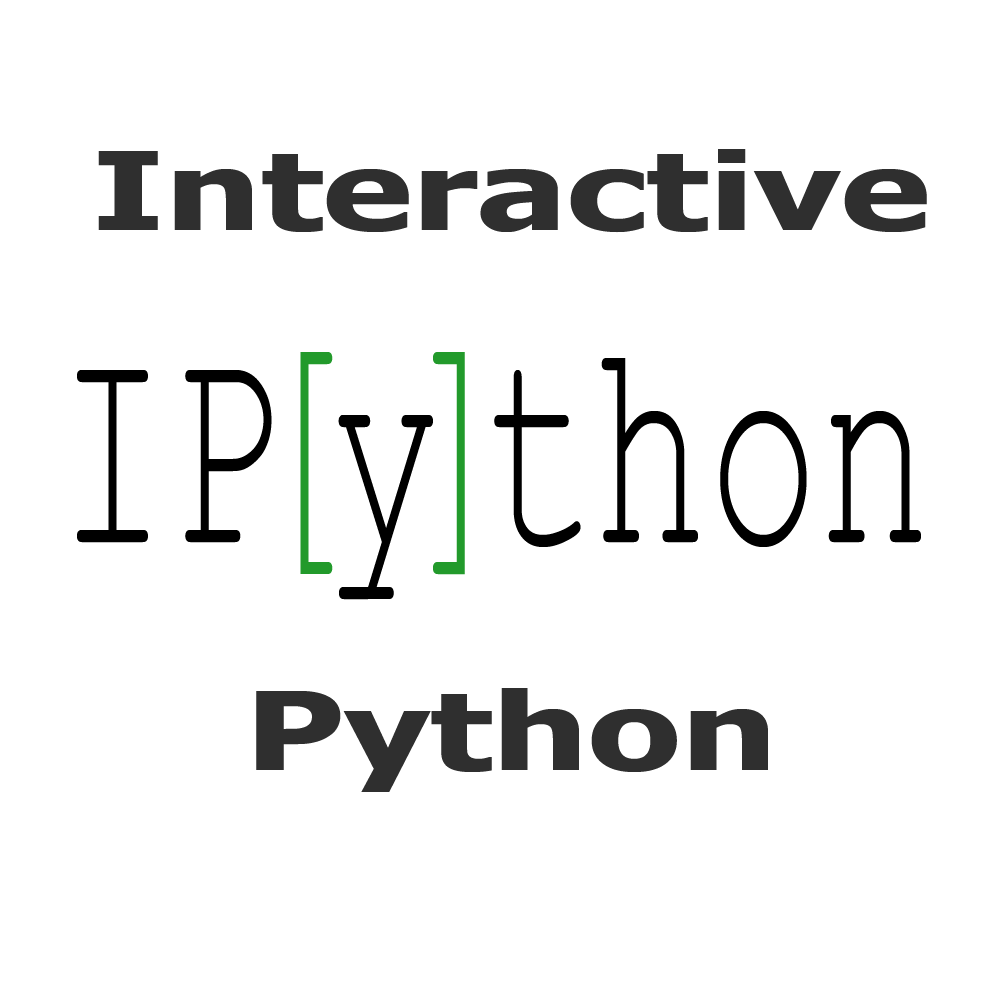
<style>
.page{position:relative;width:1000px;height:1000px;background:#ffffff}
.page>*{position:absolute;margin:0}
.t1{font:108px "Tahoma-Bold";color:#2f2f2f;scale:1.39 1}
.t2{font:300px "CourierNewPSMT";color:#229a2b;scale:0.62 1}
.t3{font:300px "CourierNewPSMT";color:#000000;scale:0.62 1}
</style>
<div class="page">
<p class="t1" style="left:98px;top:149px;width:829px;height:643px;text-align:center">Interactive<br><br><br>Python</p>
<p class="t2" style="left:300px;top:352px;width:165px;height:223px">[ ]</p>
<p class="t3" style="left:77px;top:358px;width:844px;height:242px">IP y thon</p>
</div>
